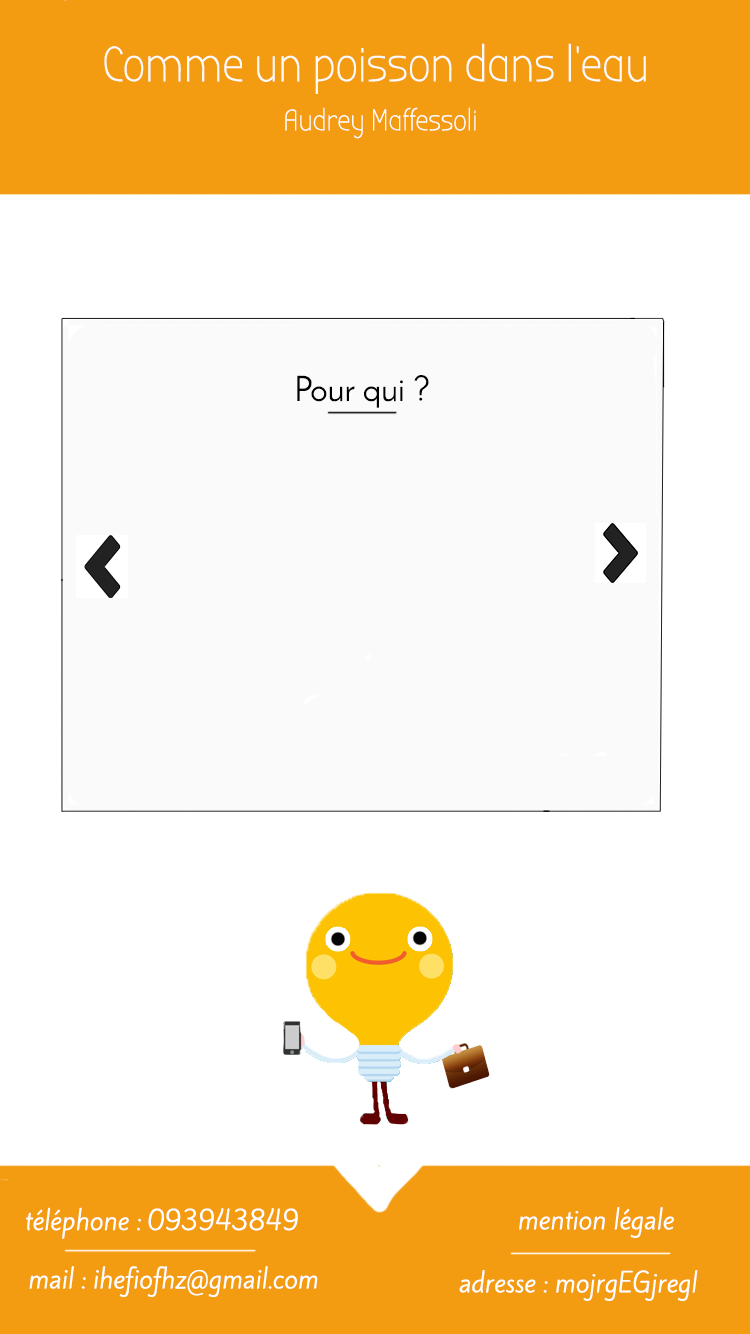
<style>
.page{position:relative;width:750px;height:1334px;background:#ffffff}
.page>*{position:absolute;margin:0}
.t1{font:50px "BubblerOne";color:#fdfbf9}
.t2{font:30px "BubblerOne";color:#fdfbf9}
.t3{font:35px "JosefinSans";color:#000000}
.t4{font:25px "KiteOne-Regular";color:#ffffff}
</style>
<div class="page">
<p class="t1" style="left:104px;top:43px;width:542px;height:51px">Comme un poisson dans l’eau</p>
<p class="t2" style="left:285px;top:107px;width:191px;height:32px">Audrey Maffessoli</p>
<p class="t3" style="left:297px;top:375px;width:132px;height:33px">Pour qui ?</p>
<p class="t4" style="left:26px;top:1207px;width:272px;height:32px">téléphone : 093943849</p>
<p class="t4" style="left:519px;top:1207px;width:155px;height:31px">mention légale</p>
<p class="t4" style="left:29px;top:1266px;width:289px;height:31px">mail : ihefiofhz@gmail.com</p>
<p class="t4" style="left:459px;top:1270px;width:239px;height:31px">adresse : mojrgEGjregl</p>
</div>
